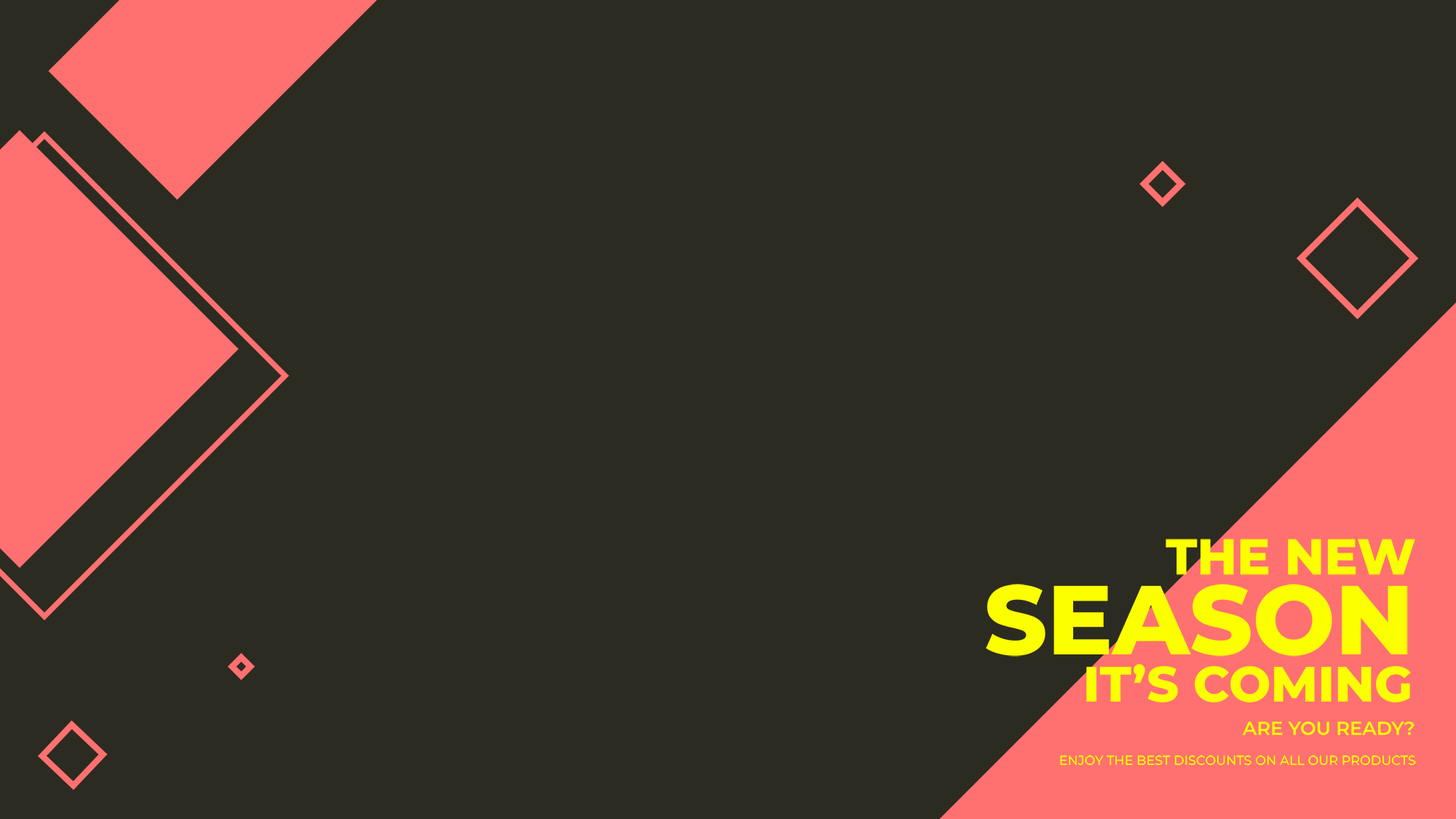
<style>
.page{position:relative;width:1456px;height:819px;background:#2c2b21}
.page>*{position:absolute;margin:0}
.t1{font:49.5px "Montserrat-ExtraBold";color:#fcff00;text-transform:uppercase}
.t2{font:97.7px "Montserrat-ExtraBold";color:#fcff00;text-transform:uppercase}
.t3{font:18.8px "Montserrat-SemiBold";color:#fcff00}
.t4{font:12.8px "Montserrat-Medium";color:#fcff00}
</style>
<div class="page">
<p class="t1" style="left:1166px;top:539px;width:249px;height:36px">the new</p>
<p class="t2" style="left:986px;top:584px;width:422px;height:73px">season</p>
<p class="t1" style="left:1086px;top:664px;width:325px;height:39px">it’s coming</p>
<p class="t3" style="left:1242px;top:721px;width:172px;height:14px">ARE YOU READY?</p>
<p class="t4" style="left:1060px;top:755px;width:356px;height:10px">ENJOY THE BEST DISCOUNTS ON ALL OUR PRODUCTS</p>
</div>
